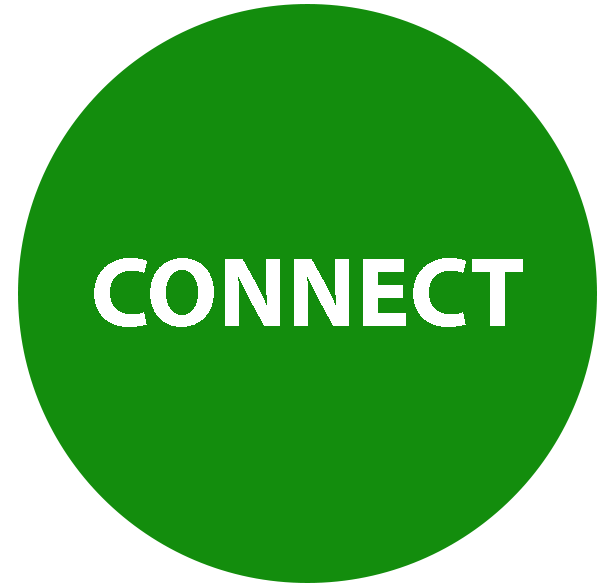
<style>
.page{position:relative;width:615px;height:587px;background:#138d0d}
.page>*{position:absolute;margin:0}
.t1{font:100px "MyriadPro-Bold";color:#ffffff}
</style>
<div class="page">
<p class="t1" style="left:94px;top:258px;width:429px;height:69px">CONNECT</p>
</div>
